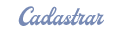
<style>
.page{position:relative;width:120px;height:32px;background:#ffffff}
.page>*{position:absolute;margin:0}
.t1{font:24.4px "MilestoneFreeVersion-Script";color:#778ab5}
</style>
<div class="page">
<p class="t1" style="left:18px;top:6px;width:86px;height:20px">Cadastrar</p>
</div>
